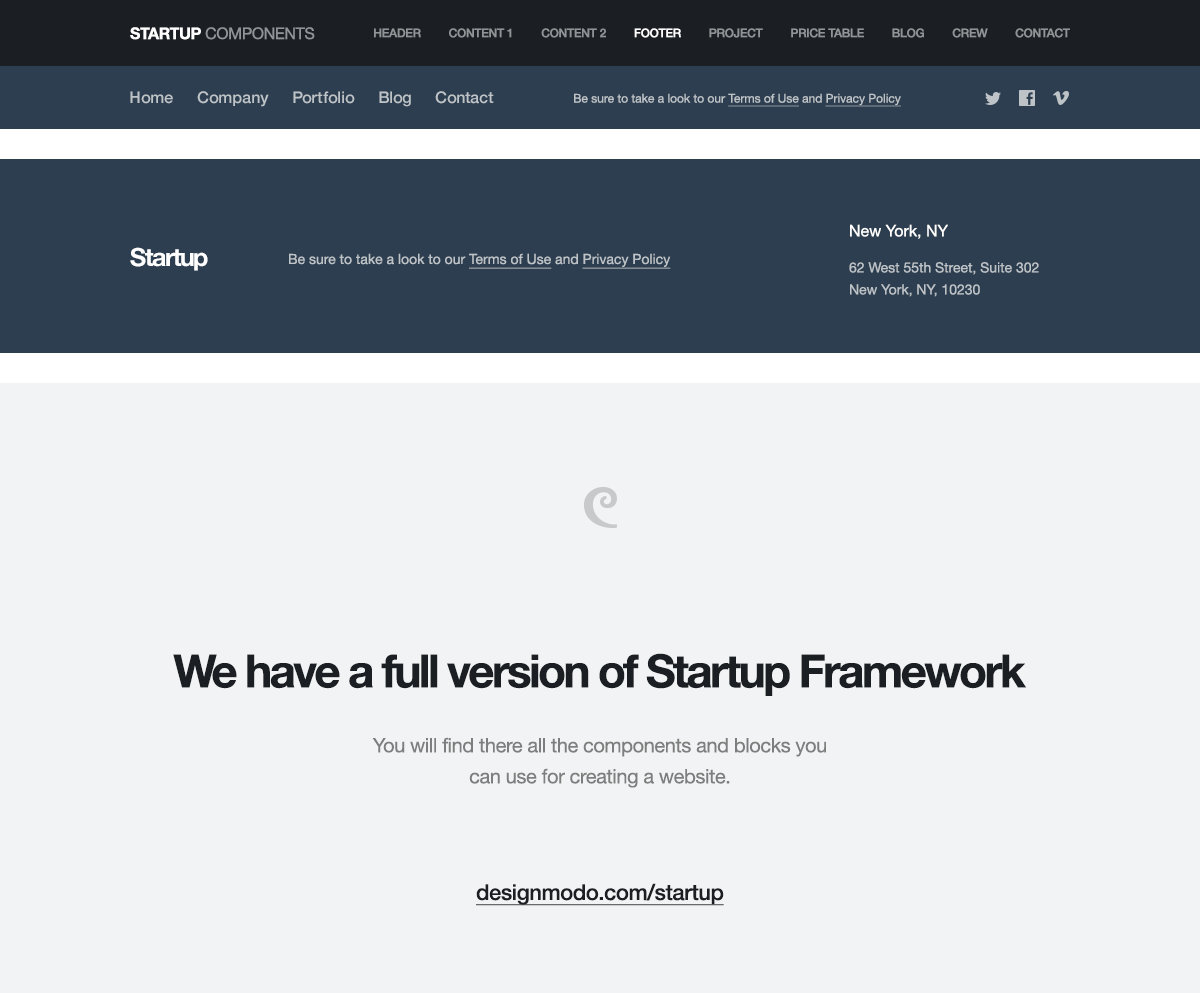
<style>
.page{position:relative;width:1200px;height:993px;background:#f2f3f4}
.page>*{position:absolute;margin:0}
.t1{font:16px "HelveticaNeue";letter-spacing:-0.02em;color:#919497;text-transform:uppercase}
.t2{font:16px "HelveticaNeue-Bold";letter-spacing:-0.02em;color:#ffffff;text-transform:uppercase}
.t3{font:12px "HelveticaNeue-Medium";letter-spacing:-0.02em;color:#919497;text-transform:uppercase}
.t4{font:12px "HelveticaNeue-Medium";letter-spacing:-0.02em;color:#ffffff;text-transform:uppercase}
.t5{font:16px "HelveticaNeue-Medium";color:#bdc3c7}
.t6{font:12px "HelveticaNeue";color:#bdc3c7}
.t7{font:12px "HelveticaNeue";color:#bdc3c7;text-decoration:underline}
.t8{font:14px/26px "HelveticaNeue";color:#bdc3c7}
.t9{font:16px/18px "HelveticaNeue";color:#ffffff}
.t10{font:14px/22px "HelveticaNeue";color:#bdc3c7}
.t11{font:25px "HelveticaNeue-Bold";letter-spacing:-0.06em;color:#ffffff}
.t12{font:14px "HelveticaNeue";color:#bdc3c7}
.t13{font:14px "HelveticaNeue";color:#bdc3c7;text-decoration:underline}
.t14{font:46px "HelveticaNeue-Bold";letter-spacing:-0.06em;color:#1b1f23}
.t15{font:20px/31px "HelveticaNeue";letter-spacing:-0.02em;color:#7e7e7e}
.t16{font:22px "HelveticaNeue-Medium";letter-spacing:-0.02em;color:#1b1f23;text-decoration:underline}
</style>
<div class="page">
<p class="t1" style="left:130px;top:27px;width:185px;height:13px"><span class="t2">Startup </span>components</p>
<p class="t3" style="left:374px;top:28px;width:696px;height:10px">header         content 1         content 2         <span class="t4">footer         </span>project         price table         blog         crew         contact</p>
<p class="t5" style="left:130px;top:91px;width:364px;height:16px">Home      Company      Portfolio      Blog      Contact</p>
<p class="t6" style="left:574px;top:93px;width:327px;height:14px">Be sure to take a look to our <span class="t7">Terms of Use </span>and <span class="t7">Privacy Policy</span></p>
<p class="t8" style="left:849px;top:224px;width:190px;height:73px"><span class="t9">New York, NY<br></span>62 West 55th Street, Suite 302 <span class="t10">New York, NY, 10230</span></p>
<p class="t11" style="left:130px;top:247px;width:78px;height:24px">Startup</p>
<p class="t12" style="left:289px;top:253px;width:382px;height:16px">Be sure to take a look to our <span class="t13">Terms of Use </span>and <span class="t13">Privacy Policy</span></p>
<p class="t14" style="left:173px;top:653px;width:854px;height:43px">We have a full version of Startup Framework</p>
<p class="t15" style="left:372px;top:737px;width:454px;height:51px;text-align:center">You will find there all the components and blocks you can use for creating a website.</p>
<p class="t16" style="left:476px;top:883px;width:248px;height:23px">designmodo.com/startup</p>
</div>
